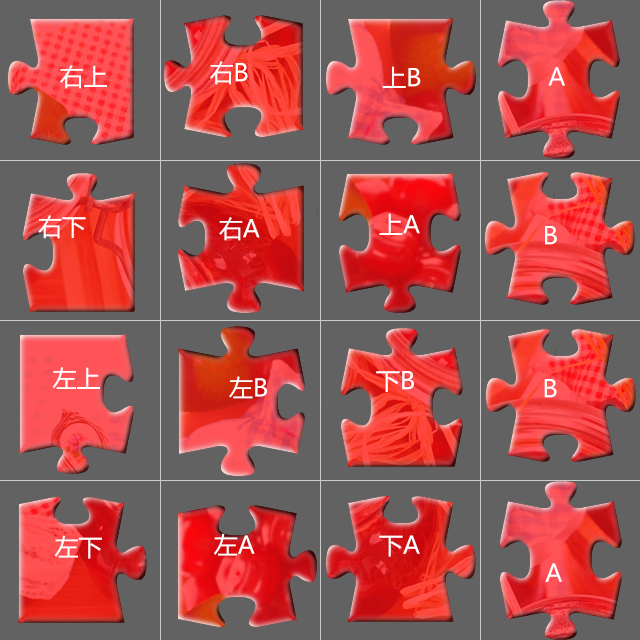
<style>
.page{position:relative;width:640px;height:640px;background:#626262}
.page>*{position:absolute;margin:0}
.t1{font:24px "MicrosoftYaHei";color:#ffffff}
</style>
<div class="page">
<p class="t1" style="left:60px;top:65px;width:47px;height:24px">右上</p>
<p class="t1" style="left:210px;top:61px;width:38px;height:24px">右B</p>
<p class="t1" style="left:382px;top:66px;width:39px;height:22px">上B</p>
<p class="t1" style="left:548px;top:67px;width:17px;height:19px">A</p>
<p class="t1" style="left:38px;top:215px;width:48px;height:24px">右下</p>
<p class="t1" style="left:219px;top:217px;width:41px;height:24px">右A</p>
<p class="t1" style="left:379px;top:213px;width:41px;height:22px">上A</p>
<p class="t1" style="left:545px;top:226px;width:12px;height:19px">B</p>
<p class="t1" style="left:52px;top:367px;width:48px;height:22px">左上</p>
<p class="t1" style="left:229px;top:376px;width:38px;height:23px">左B</p>
<p class="t1" style="left:376px;top:371px;width:38px;height:21px">下B</p>
<p class="t1" style="left:544px;top:379px;width:13px;height:19px">B</p>
<p class="t1" style="left:214px;top:533px;width:41px;height:23px">左A</p>
<p class="t1" style="left:54px;top:535px;width:48px;height:24px">左下</p>
<p class="t1" style="left:379px;top:535px;width:41px;height:22px">下A</p>
<p class="t1" style="left:545px;top:563px;width:17px;height:19px">A</p>
</div>
